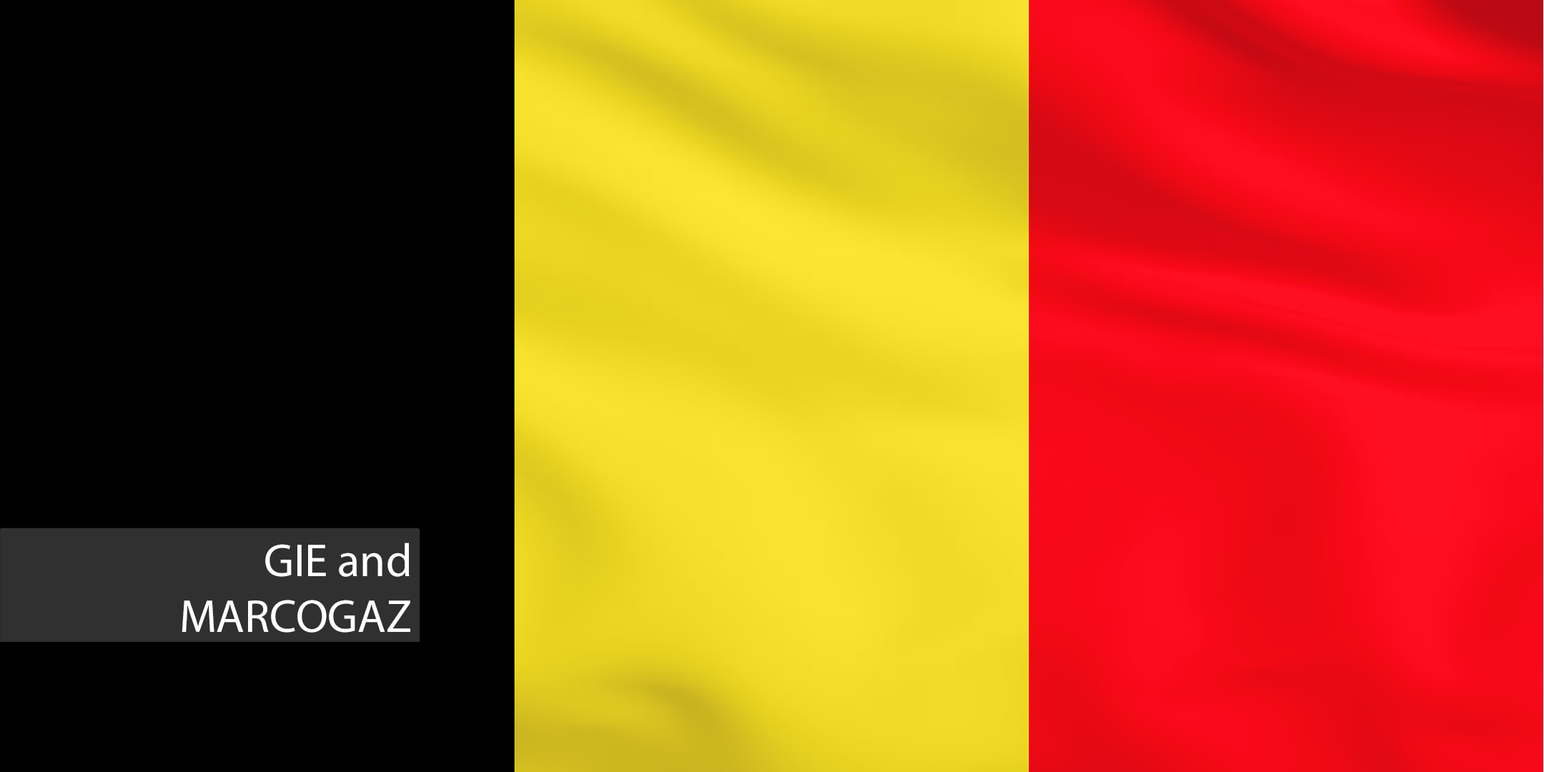
<style>
.page{position:relative;width:1544px;height:772px;background:#000000}
.page>*{position:absolute;margin:0}
.t1{font:46.5px "MyriadPro-Regular";color:#ffffff}
</style>
<div class="page">
<p class="t1" style="left:182px;top:543px;width:228px;height:90px;text-align:right">GIE and<br>MARCOGAZ</p>
</div>
